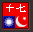
<style>
.page{position:relative;width:33px;height:32px;background:#f20000}
.page>*{position:absolute;margin:0}
.t1{font:10.4px "SimSun";color:#ffffff}
</style>
<div class="page">
<p class="t1" style="left:6px;top:4px;width:20px;height:8px">十七</p>
</div>
